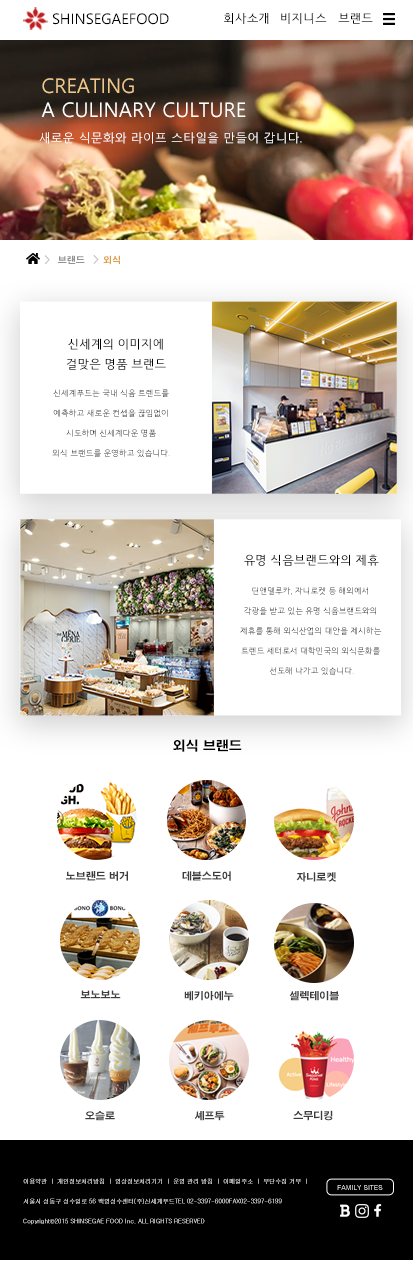
<style>
.page{position:relative;width:413px;height:1261px;background:#ffffff}
.page>*{position:absolute;margin:0}
.t1{font:15px "SegoeUISymbol";color:#000000}
.t2{font:12px "HCRDotum";color:#000000}
.t3{font:12px "HCRDotum"}
.t4{font:20px "MalgunGothic";color:#ffffff}
.t5{font:20px "MalgunGothic";color:#efc88d}
.t6{font:12px "MalgunGothic";color:#ffffff}
.t7{font:12px "H2gtrE";color:#c5c5c5}
.t8{font:9px "H2gtrE";color:#929292}
.t9{font:9px "H2gtrE";color:#df9e46}
.t10{font:12px/20px "HCRDotum";color:#000000}
.t11{font:8px/20px "HCRDotum"}
.t12{font:13px "H2gtrE";color:#000000}
.t13{font:10px "H2gtrE";color:#3e3c3c}
.t14{font:6px/20px "Gulim"}
.t15{font:6.9px "Gulim"}
</style>
<div class="page">
<p class="t1" style="left:53px;top:13px;width:116px;height:12px">SHINSEGAEFOOD</p>
<p class="t2" style="left:224px;top:13px;width:45px;height:11px">회사소개</p>
<p class="t3" style="left:281px;top:13px;width:46px;height:11px">비지니스</p>
<p class="t2" style="left:338px;top:13px;width:35px;height:11px">브랜드</p>
<p class="t4" style="left:41px;top:78px;width:205px;height:40px"><span class="t5">CREATING<br></span>A CULINARY CULTURE</p>
<p class="t6" style="left:39px;top:132px;width:263px;height:12px">새로운 식문화와 라이프 스타일을 만들어 갑니다.</p>
<p class="t7" style="left:44px;top:255px;width:6px;height:10px">&gt;</p>
<p class="t8" style="left:58px;top:255px;width:27px;height:9px">브랜드</p>
<p class="t7" style="left:93px;top:254px;width:6px;height:10px">&gt;</p>
<p class="t9" style="left:103px;top:255px;width:17px;height:10px">외식</p>
<p class="t10" style="left:66px;top:338px;width:100px;height:32px;text-align:center">신세계의 이미지에<br>걸맞은 명품 브랜드</p>
<p class="t11" style="left:52px;top:389px;width:118px;height:68px;text-align:center">신세계푸드는 국내 식음 트렌드를<br>예측하고 새로운 컨셉을 끊임없이<br>시도하며 신세계다운 명품<br>외식 브랜드를 운영하고 있습니다.</p>
<p class="t2" style="left:244px;top:554px;width:135px;height:12px">유명 식음브랜드와의 제휴</p>
<p class="t11" style="left:240px;top:587px;width:142px;height:88px;text-align:center">딘앤델루카, 자니로켓 등 해외에서<br>각광을 받고 있는 유명 식음브랜드와의<br>제휴를 통해 외식산업의 대안을 제시하는<br>트렌드 세터로서 대학민국의 외식문화를<br> 선도해 나가고 있습니다.</p>
<p class="t12" style="left:173px;top:739px;width:69px;height:13px">외식 브랜드</p>
<p class="t13" style="left:66px;top:871px;width:62px;height:10px">노브랜드 버거</p>
<p class="t13" style="left:182px;top:871px;width:49px;height:10px">데블스도어</p>
<p class="t13" style="left:296px;top:872px;width:40px;height:10px">자니로켓</p>
<p class="t13" style="left:80px;top:990px;width:41px;height:9px">보노보노</p>
<p class="t13" style="left:184px;top:991px;width:50px;height:10px">베키아에누</p>
<p class="t13" style="left:289px;top:991px;width:50px;height:10px">셀렉테이블</p>
<p class="t13" style="left:293px;top:1110px;width:40px;height:11px">스무디킹</p>
<p class="t13" style="left:85px;top:1111px;width:30px;height:10px">오슬로</p>
<p class="t13" style="left:194px;top:1111px;width:31px;height:10px">셰프투</p>
<p class="t14" style="left:23px;top:1178px;width:284px;height:47px">이용약관 ㅣ 개인정보처리방침 ㅣ 영상정보처리기기 ㅣ 운영 관리 방침 ㅣ 이메일주소 ㅣ 무단수집 거부 ㅣ <br>서울시 성동구 성수일로 56 백영성수센터(주)신세계푸드TEL 02-3397-6000FAX02-3397-6199<br>Copyright©2015 SHINSEGAE FOOD Inc. ALL RIGHTS RESERVED</p>
<p class="t15" style="left:337px;top:1185px;width:46px;height:5px">FAMILY SITES</p>
</div>
